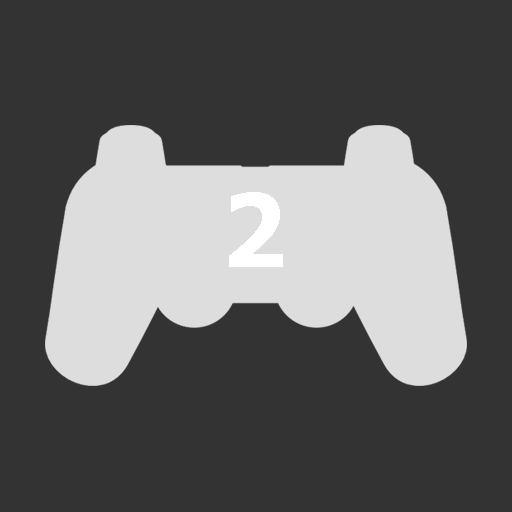
<style>
.page{position:relative;width:512px;height:512px;background:#333333}
.page>*{position:absolute;margin:0}
.t1{font:100px "Tahoma-Bold";color:#ffffff}
</style>
<div class="page">
<p class="t1" style="left:229px;top:192px;width:54px;height:75px">2</p>
</div>
